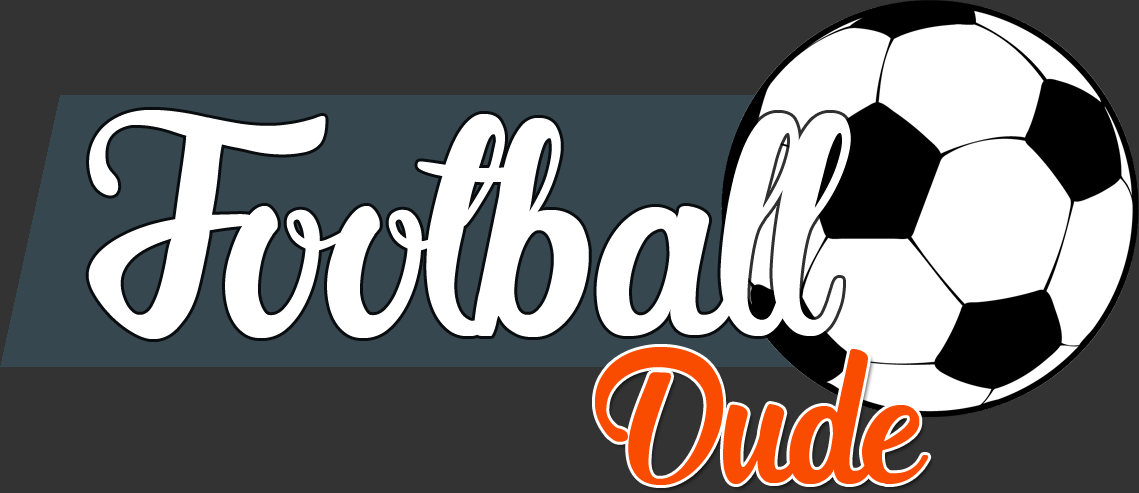
<style>
.page{position:relative;width:1139px;height:493px;background:#333333}
.page>*{position:absolute;margin:0}
.t1{font:423.9px "Blanche-de-la-Fontaine";color:#ffffff}
.t2{font:254.3px "Blanche-de-la-Fontaine";color:#fa4c00}
</style>
<div class="page">
<p class="t1" style="left:88px;top:110px;width:763px;height:229px">Football</p>
<p class="t2" style="left:595px;top:347px;width:334px;height:138px">Dude</p>
</div>
